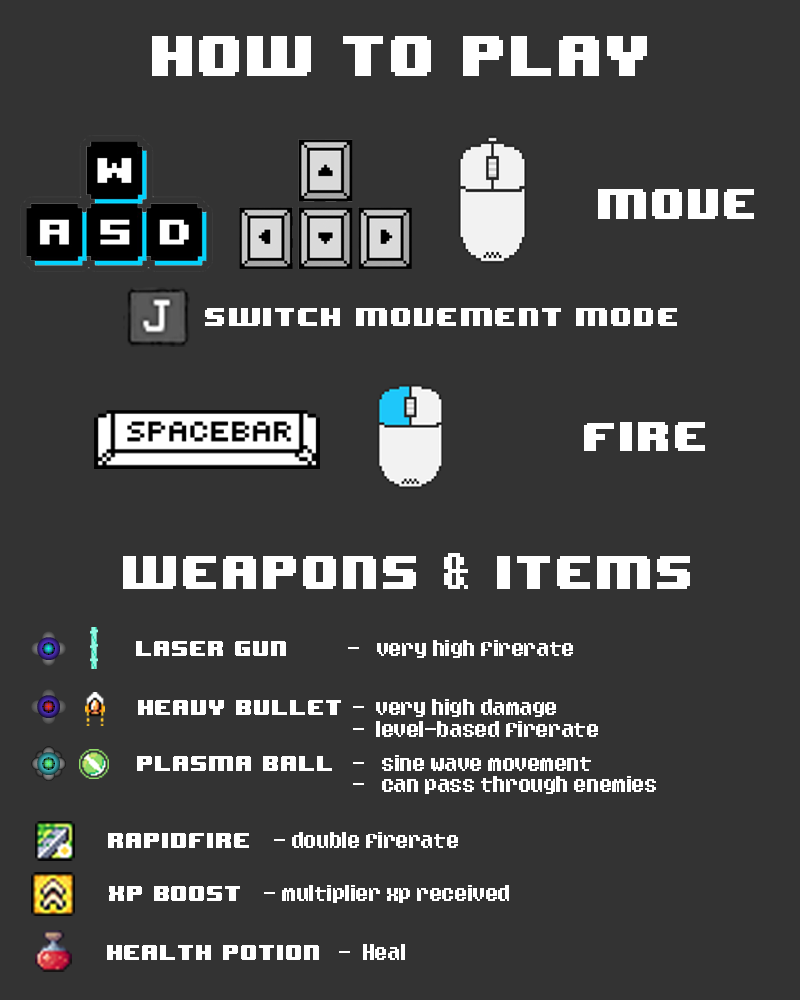
<style>
.page{position:relative;width:800px;height:1000px;background:#333333}
.page>*{position:absolute;margin:0}
.t1{font:48px "8BITWONDERNominal";color:#ffffff}
.t2{font:36px "8BITWONDERNominal";color:#ffffff}
.t3{font:21.8px "8BITWONDERNominal";color:#ffffff;scale:1.06 1}
.t4{font:34.4px "8BITWONDERNominal";color:#ffffff;scale:1.06 1}
.t5{font:40px "8BITWONDERNominal";color:#ffffff}
.t6{font:40px "Eight-Bit-Dragon";color:#ffffff}
.t7{font:18px "Eight-Bit-Dragon";color:#ffffff}
.t8{font:18px "8BITWONDERNominal";color:#ffffff}
</style>
<div class="page">
<p class="t1" style="left:152px;top:36px;width:495px;height:40px">How to play</p>
<p class="t2" style="left:598px;top:189px;width:156px;height:30px">MOVE</p>
<p class="t3" style="left:205px;top:308px;width:472px;height:18px">switch movement mode</p>
<p class="t4" style="left:584px;top:422px;width:121px;height:29px">Fire</p>
<p class="t5" style="left:123px;top:556px;width:293px;height:33px">weapons</p>
<p class="t6" style="left:444px;top:553px;width:24px;height:36px">&amp;</p>
<p class="t5" style="left:497px;top:556px;width:193px;height:33px">ITEMS</p>
<p class="t7" style="left:136px;top:640px;width:437px;height:18px"><span class="t8">laser gun              </span>-   very high firerate</p>
<p class="t7" style="left:138px;top:699px;width:460px;height:38px"><span class="t8">Heavy bullet </span>-  very high damage  <br>      -  level-based firerate</p>
<p class="t7" style="left:137px;top:755px;width:519px;height:39px"><span class="t8">plasma ball  </span>-   sine wave movement  <br>                                        -   can pass through enemies</p>
<p class="t8" style="left:108px;top:833px;width:141px;height:15px">rapidfire</p>
<p class="t7" style="left:274px;top:832px;width:184px;height:16px">- double firerate</p>
<p class="t8" style="left:109px;top:886px;width:131px;height:15px">XP Boost</p>
<p class="t7" style="left:264px;top:885px;width:245px;height:18px">- multiplier xp received</p>
<p class="t8" style="left:107px;top:945px;width:212px;height:15px">Health potion</p>
<p class="t7" style="left:339px;top:944px;width:66px;height:16px">-  Heal</p>
</div>
